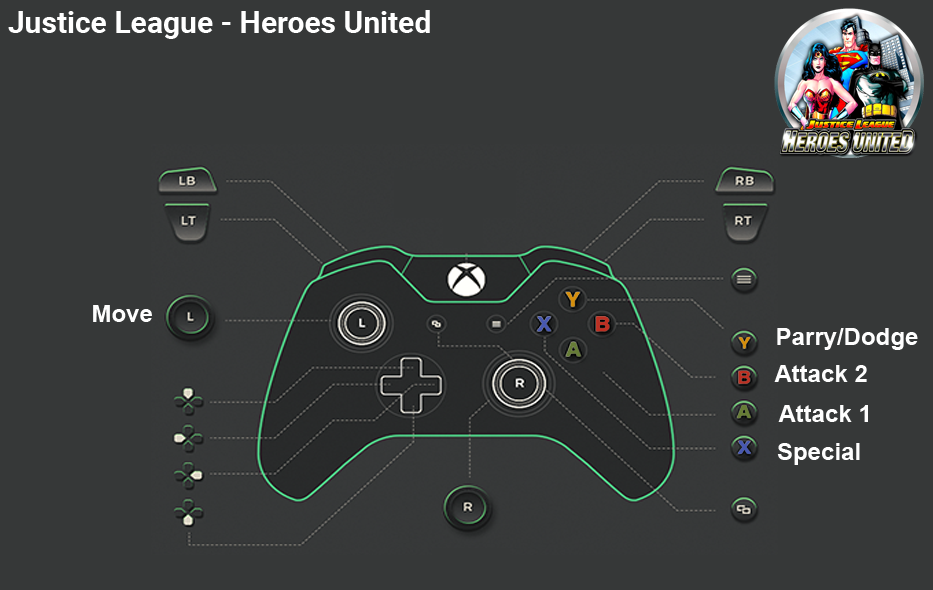
<style>
.page{position:relative;width:933px;height:590px;background:#363838}
.page>*{position:absolute;margin:0}
.t1{font:30px "Roboto-Bold";color:#ffffff}
.t2{font:24px "Arial-BoldMT";color:#fefefe}
</style>
<div class="page">
<p class="t1" style="left:8px;top:10px;width:422px;height:29px">Justice League - Heroes United</p>
<p class="t2" style="left:93px;top:305px;width:59px;height:17px">Move</p>
<p class="t2" style="left:777px;top:328px;width:141px;height:22px">Parry/Dodge</p>
<p class="t2" style="left:774px;top:365px;width:93px;height:17px">Attack 2</p>
<p class="t2" style="left:778px;top:405px;width:90px;height:17px">Attack 1</p>
<p class="t2" style="left:777px;top:443px;width:83px;height:22px">Special</p>
</div>
